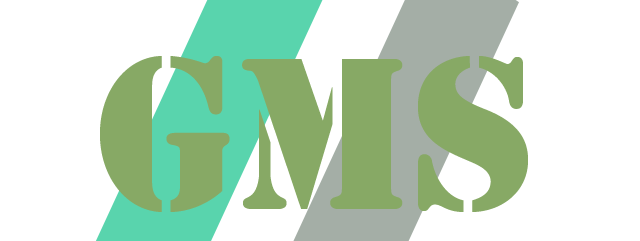
<style>
.page{position:relative;width:640px;height:241px;background:#ffffff}
.page>*{position:absolute;margin:0}
.t1{font:200px "StencilStd";color:#87a965}
</style>
<div class="page">
<p class="t1" style="left:100px;top:56px;width:428px;height:156px">GMS</p>
</div>
